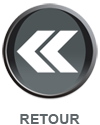
<style>
.page{position:relative;width:100px;height:125px;background:#ffffff}
.page>*{position:absolute;margin:0}
.t1{font:14.4px "Arial-BoldMT";color:#5e6669}
</style>
<div class="page">
<p class="t1" style="left:20px;top:114px;width:60px;height:10px">RETOUR</p>
</div>
